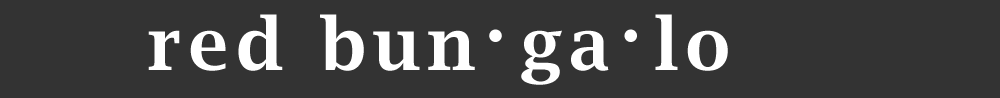
<style>
.page{position:relative;width:1000px;height:98px;background:#333333}
.page>*{position:absolute;margin:0}
.t1{font:72px "LucidaBright-Demi";letter-spacing:0.1em;color:#ffffff}
.t2{font:100px "Helvetica";letter-spacing:0.1em;color:#ffffff}
</style>
<div class="page">
<p class="t1" style="left:148px;top:14px;width:580px;height:71px">red bun<span class="t2">·</span>ga<span class="t2">·</span>lo</p>
</div>
